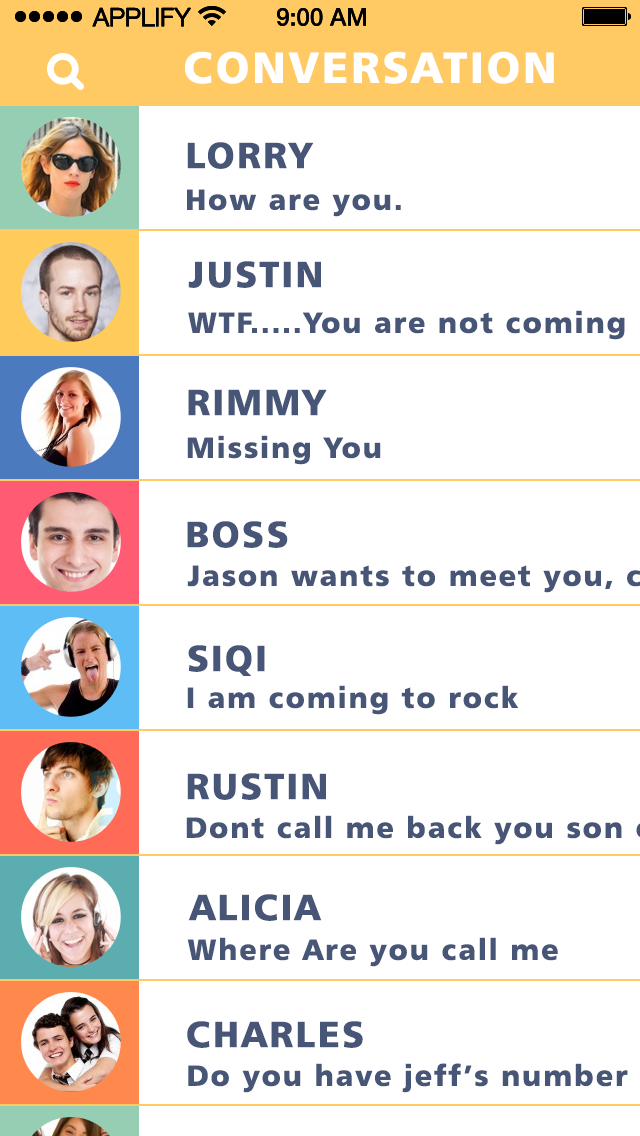
<style>
.page{position:relative;width:640px;height:1136px;background:#ffffff}
.page>*{position:absolute;margin:0}
.t1{font:25px "HelveticaNeueLTCom-Lt";letter-spacing:-0.02em;color:#000000;font-weight:bold}
.t2{font:75px "Humanist777BT-BlackB";letter-spacing:0.06em;color:#ffffff}
.t3{font:62.5px "Humanist777BT-BlackB";letter-spacing:0.06em;color:#475577}
.t4{font:50px "Humanist777BT-BlackB";letter-spacing:0.06em;color:#475577}
</style>
<div class="page">
<p class="t1" style="left:92px;top:7px;width:99px;height:20px">APPLIFY</p>
<p class="t1" style="left:92px;top:7px;width:99px;height:20px">APPLIFY</p>
<p class="t2" style="left:185px;top:51px;width:369px;height:33px">CONVERSATION</p>
<p class="t3" style="left:187px;top:142px;width:127px;height:27px">LORRY</p>
<p class="t4" style="left:187px;top:189px;width:214px;height:28px">How are you.</p>
<p class="t3" style="left:188px;top:261px;width:133px;height:27px">JUSTIN</p>
<p class="t4" style="left:188px;top:310px;width:437px;height:30px">WTF.....You are not coming</p>
<p class="t3" style="left:188px;top:389px;width:139px;height:27px">RIMMY</p>
<p class="t4" style="left:187px;top:435px;width:194px;height:30px">Missing You</p>
<p class="t3" style="left:187px;top:521px;width:101px;height:27px">BOSS</p>
<p class="t3" style="left:188px;top:645px;width:77px;height:31px">SIQI</p>
<p class="t4" style="left:187px;top:685px;width:331px;height:30px">I am coming to rock</p>
<p class="t3" style="left:187px;top:773px;width:139px;height:27px">RUSTIN</p>
<p class="t3" style="left:188px;top:894px;width:134px;height:27px">ALICIA</p>
<p class="t4" style="left:187px;top:937px;width:371px;height:30px">Where Are you call me</p>
<p class="t3" style="left:187px;top:1021px;width:176px;height:27px">CHARLES</p>
<p class="t4" style="left:188px;top:1063px;width:440px;height:30px">Do you have jeff’s number</p>
</div>
